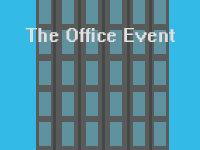
<style>
.page{position:relative;width:200px;height:150px;background:#33bae6}
.page>*{position:absolute;margin:0}
.t1{font:18px "System";color:#e2dfdf}
</style>
<div class="page">
<p class="t1" style="left:25px;top:28px;width:150px;height:14px">The Office Event</p>
</div>
